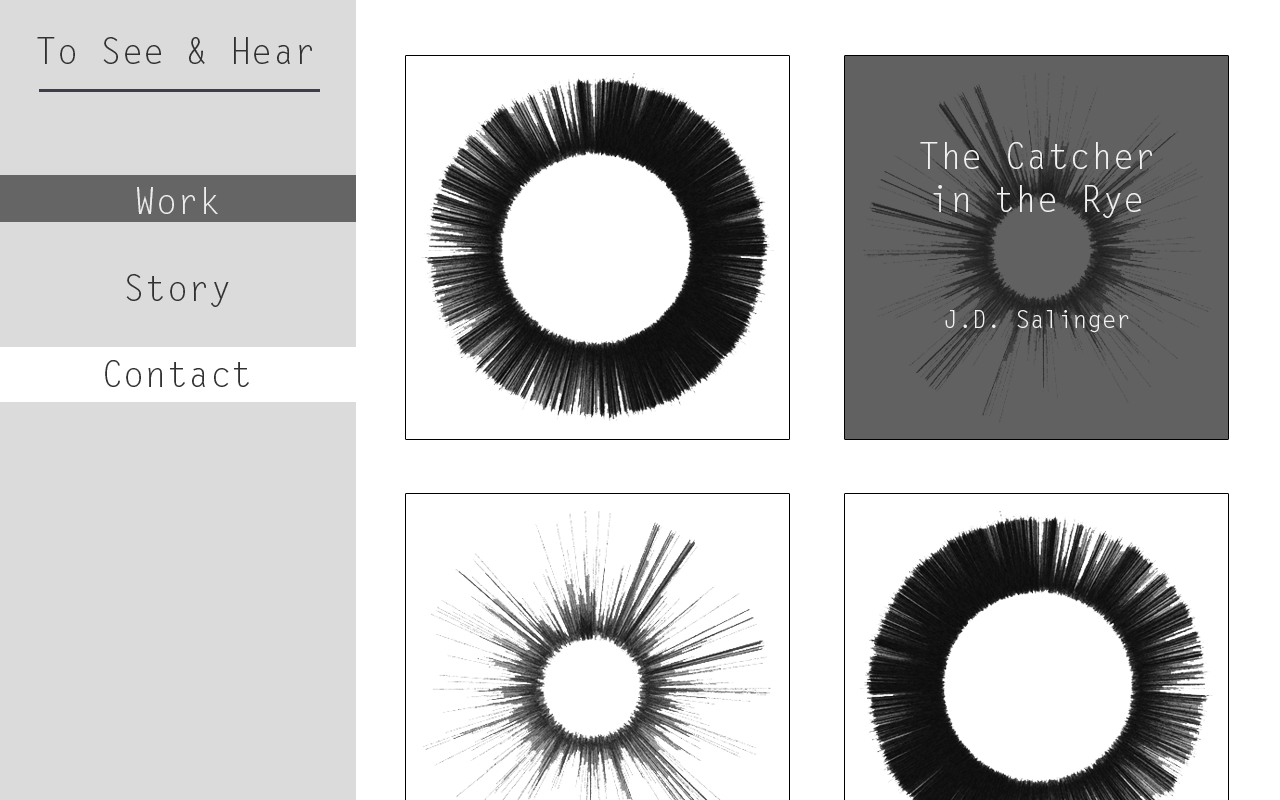
<style>
.page{position:relative;width:1280px;height:800px;background:#ffffff}
.page>*{position:absolute;margin:0}
.t1{font:36px "LetterGothicStd";color:#313131}
.t2{font:36px "LetterGothicStd";color:#f1f1f1}
.t3{font:24px "LetterGothicStd";color:#f1f1f1}
.t4{font:36px "LetterGothicStd";color:#ececec}
</style>
<div class="page">
<p class="t1" style="left:37px;top:37px;width:275px;height:27px">To See &amp; Hear</p>
<p class="t2" style="left:920px;top:142px;width:232px;height:191px;text-align:center">The Catcher<br>in the Rye<br><br><br><span class="t3">J.D. Salinger</span></p>
<p class="t1" style="left:105px;top:187px;width:144px;height:200px;text-align:center"><span class="t4">Work<br></span><br>Story<br><br>Contact</p>
</div>
